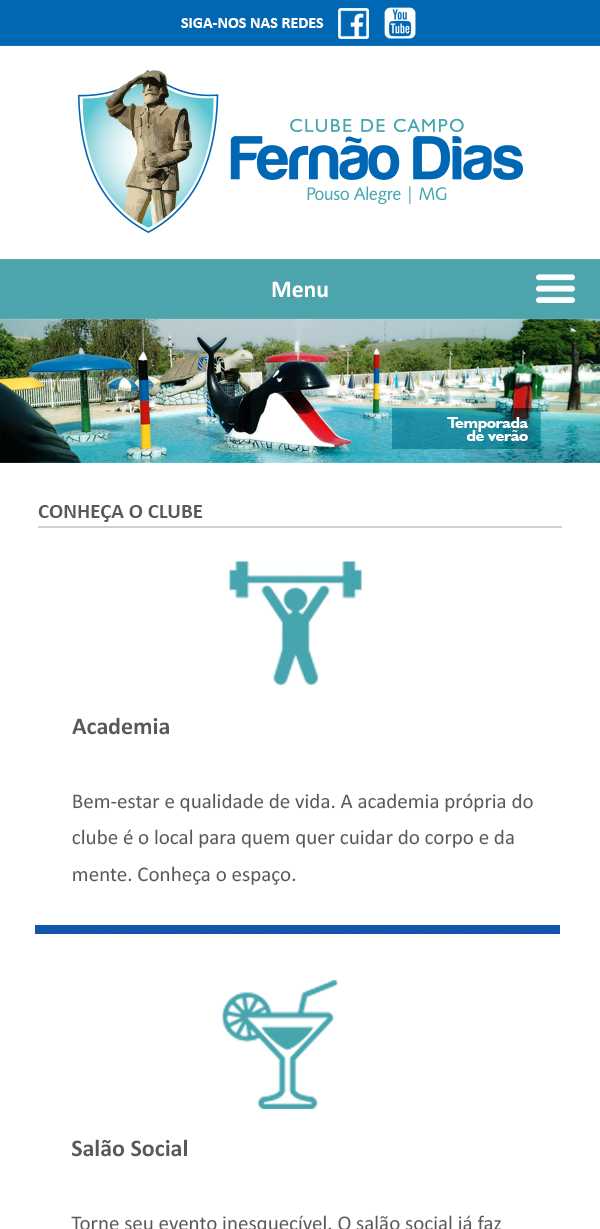
<style>
.page{position:relative;width:600px;height:1229px;background:#ffffff}
.page>*{position:absolute;margin:0}
.t1{font:16px "Calibri-Bold";color:#ffffff}
.t2{font:24px "Calibri-Bold";color:#ffffff}
.t3{font:16.4px/13.4px "Humanist521BT-Bold";letter-spacing:-0.025em;color:#ffffff}
.t4{font:21px "Calibri-Bold";color:#58595b}
.t5{font:21px/36.8px "Calibri";color:#58595b}
.t6{font:24px/36.8px "Calibri-Bold";color:#58595b}
</style>
<div class="page">
<p class="t1" style="left:181px;top:18px;width:143px;height:10px">SIGA-NOS NAS REDES</p>
<p class="t2" style="left:272px;top:281px;width:56px;height:17px">Menu</p>
<p class="t3" style="left:447px;top:417px;width:81px;height:24px;text-align:right">Temporada<br>de verão</p>
<p class="t4" style="left:38px;top:505px;width:164px;height:17px">CONHEÇA O CLUBE</p>
<p class="t5" style="left:72px;top:717px;width:461px;height:168px"><span class="t6">Academia<br><br></span>Bem-estar e qualidade de vida. A academia própria do clube é o local para quem quer cuidar do corpo e da mente. Conheça o espaço.</p>
</div>
